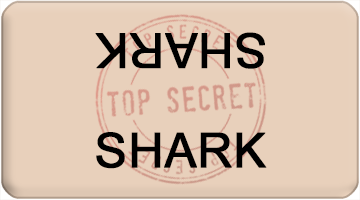
<style>
.page{position:relative;width:360px;height:200px;background:#e8d0bb}
.page>*{position:absolute;margin:0}
.t1{font:48px "ArialMT";color:#000000;font-weight:bold}
</style>
<div class="page">
<p class="t1" style="left:95px;top:32px;width:170px;height:37px;rotate:180deg">SHARK</p>
<p class="t1" style="left:96px;top:132px;width:171px;height:37px">SHARK</p>
</div>
